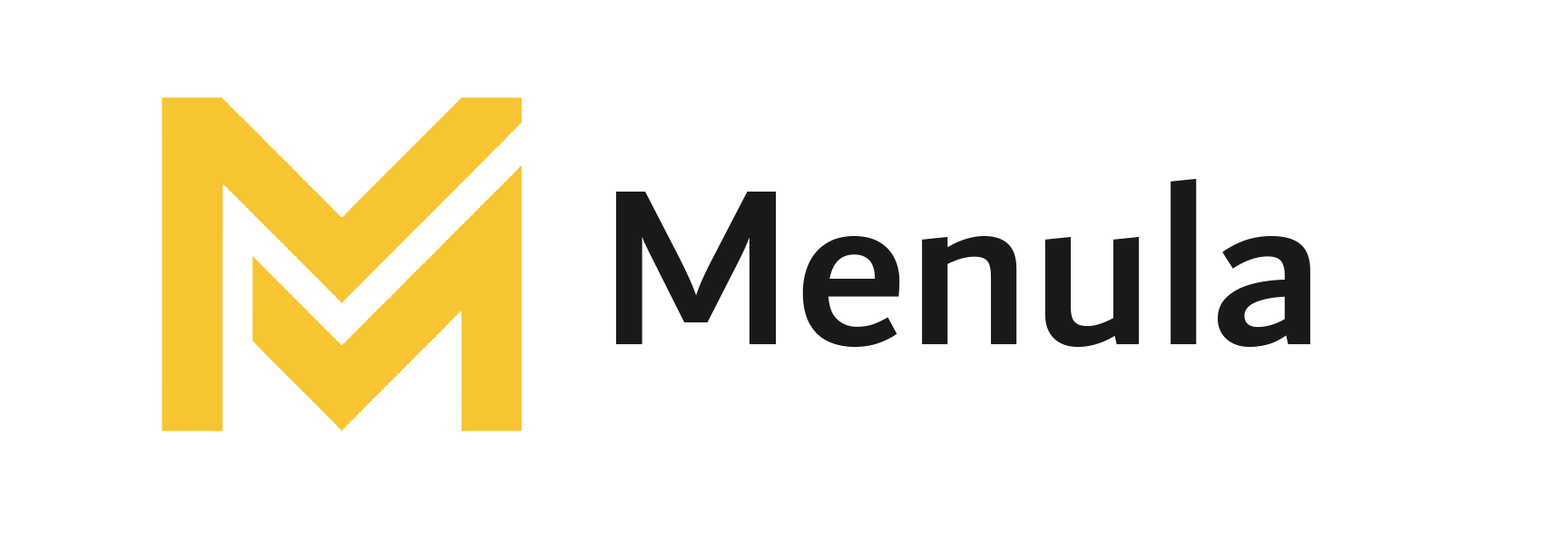
<style>
.page{position:relative;width:1568px;height:533px;background:#ffffff}
.page>*{position:absolute;margin:0}
.t1{font:235.9px "Dubai-Medium";color:#191919}
</style>
<div class="page">
<p class="t1" style="left:616px;top:179px;width:694px;height:168px">Menula</p>
</div>
